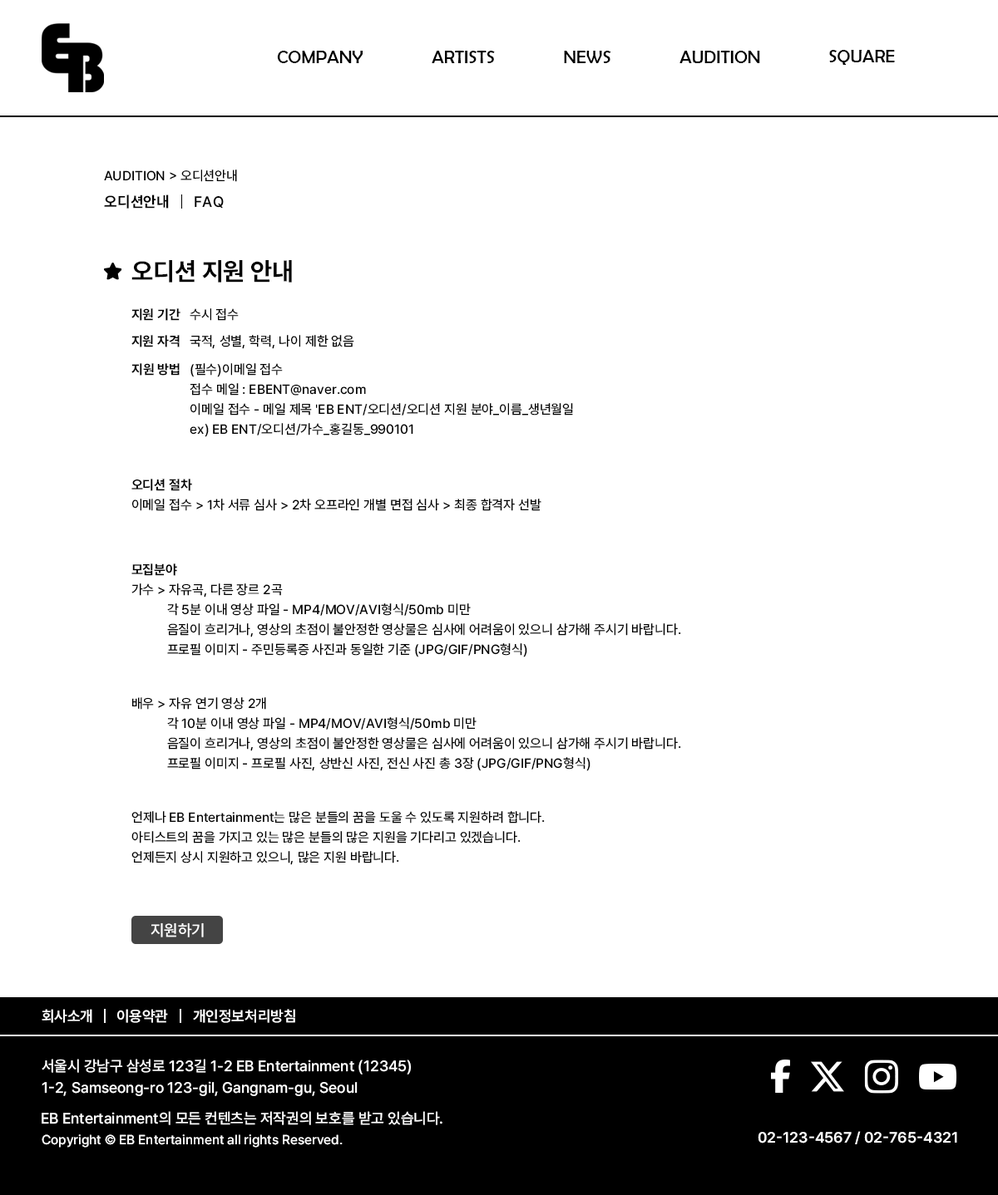
<style>
.page{position:relative;width:998px;height:1195px;background:#ffffff}
.page>*{position:absolute;margin:0}
.t1{font:18.3px "BerlinSansFB-Reg";color:#000000}
.t2{font:13.3px "Pretendard-Medium";color:#000000}
.t3{font:15px "Pretendard-Bold";color:#000000}
.t4{font:15px "Pretendard-Medium";color:#000000}
.t5{font:24.9px "Pretendard-Bold";color:#000000}
.t6{font:13.3px "Pretendard-Bold";color:#000000}
.t7{font:13.3px/20px "Pretendard-Medium";color:#000000}
.t8{font:13.3px/20px "Pretendard-Bold";color:#000000}
.t9{font:15.8px "Pretendard-Medium";color:#ffffff}
.t10{font:15px "Pretendard-SemiBold";color:#ffffff}
.t11{font:15px/21.6px "Pretendard-Medium";color:#ffffff}
.t12{font:15px "Pretendard-Medium";color:#ffffff}
.t13{font:13.3px "Pretendard-Medium";color:#ffffff}
</style>
<div class="page">
<p class="t1" style="left:277px;top:51px;width:85px;height:12px">COMPANY</p>
<p class="t1" style="left:431px;top:51px;width:64px;height:12px">ARTISTS</p>
<p class="t1" style="left:564px;top:51px;width:47px;height:12px">NEWS</p>
<p class="t1" style="left:679px;top:51px;width:81px;height:12px">AUDITION</p>
<p class="t1" style="left:829px;top:50px;width:65px;height:15px">SQUARE</p>
<p class="t2" style="left:104px;top:170px;width:133px;height:12px">AUDITION &gt; 오디션안내</p>
<p class="t3" style="left:104px;top:195px;width:65px;height:14px">오디션안내</p>
<p class="t4" style="left:195px;top:196px;width:29px;height:13px">FAQ</p>
<p class="t5" style="left:131px;top:260px;width:161px;height:23px">오디션 지원 안내</p>
<p class="t6" style="left:131px;top:308px;width:108px;height:13px">지원 기간   <span class="t2">수시 접수</span></p>
<p class="t2" style="left:131px;top:335px;width:223px;height:14px"><span class="t6">지원 자격   </span>국적, 성별, 학력, 나이 제한 없음</p>
<p class="t7" style="left:131px;top:363px;width:442px;height:74px"><span class="t8">지원 방법   </span>(필수)이메일 접수<br>                  접수 메일 : EBENT@naver.com<br>                  이메일 접수 - 메일 제목 'EB ENT/오디션/오디션 지원 분야_이름_생년월일<br>                  ex) EB ENT/오디션/가수_홍길동_990101</p>
<p class="t7" style="left:131px;top:479px;width:410px;height:32px"><span class="t8">오디션 절차<br></span>이메일 접수 &gt; 1차 서류 심사 &gt; 2차 오프라인 개별 면접 심사 &gt; 최종 합격자 선발</p>
<p class="t7" style="left:131px;top:564px;width:550px;height:94px"><span class="t8">모집분야<br></span>가수 &gt; 자유곡, 다른 장르 2곡<br>           각 5분 이내 영상 파일 - MP4/MOV/AVI형식/50mb 미만<br>           음질이 흐리거나, 영상의 초점이 불안정한 영상물은 심사에 어려움이 있으니 삼가해 주시기 바랍니다.<br>           프로필 이미지 - 주민등록증 사진과 동일한 기준 (JPG/GIF/PNG형식)</p>
<p class="t7" style="left:132px;top:697px;width:549px;height:74px">배우 &gt; 자유 연기 영상 2개<br>           각 10분 이내 영상 파일 - MP4/MOV/AVI형식/50mb 미만<br>           음질이 흐리거나, 영상의 초점이 불안정한 영상물은 심사에 어려움이 있으니 삼가해 주시기 바랍니다.<br>           프로필 이미지 - 프로필 사진, 상반신 사진, 전신 사진 총 3장 (JPG/GIF/PNG형식)</p>
<p class="t7" style="left:131px;top:811px;width:413px;height:54px">언제나 EB Entertainment는 많은 분들의 꿈을 도울 수 있도록 지원하려 합니다. <br>아티스트의 꿈을 가지고 있는 많은 분들의 많은 지원을 기다리고 있겠습니다.<br>언제든지 상시 지원하고 있으니, 많은 지원 바랍니다.</p>
<p class="t9" style="left:150px;top:923px;width:54px;height:15px">지원하기</p>
<p class="t10" style="left:42px;top:1009px;width:50px;height:14px">회사소개</p>
<p class="t10" style="left:117px;top:1009px;width:51px;height:14px">이용약관</p>
<p class="t10" style="left:193px;top:1009px;width:102px;height:14px">개인정보처리방침</p>
<p class="t11" style="left:42px;top:1059px;width:369px;height:37px">서울시 강남구 삼성로 123길 1-2 EB Entertainment (12345)<br>1-2, Samseong-ro 123-gil, Gangnam-gu, Seoul</p>
<p class="t12" style="left:42px;top:1111px;width:400px;height:15px">EB Entertainment의 모든 컨텐츠는 저작권의 보호를 받고 있습니다.</p>
<p class="t10" style="left:757px;top:1131px;width:200px;height:14px">02-123-4567 / 02-765-4321</p>
<p class="t13" style="left:42px;top:1135px;width:300px;height:13px">Copyright © EB Entertainment all rights Reserved.</p>
</div>
